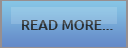
<style>
.page{position:relative;width:128px;height:48px}
.page>*{position:absolute;margin:0}
.t1{font:14px "Ubuntu-Medium";color:#2a2f33}
</style>
<div class="page">
<p class="t1" style="left:22px;top:20px;width:91px;height:10px">READ MORE...</p>
</div>
